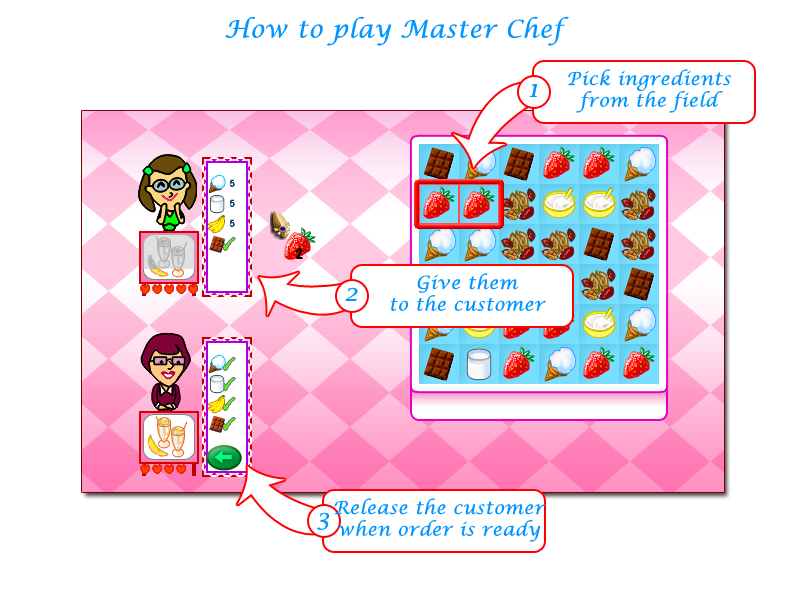
<style>
.page{position:relative;width:800px;height:600px;background:#ffffff}
.page>*{position:absolute;margin:0}
.t1{font:24px "LucidaCalligraphy-Italic";letter-spacing:0.03em;color:#0095ff}
.t2{font:18px "LucidaCalligraphy-Italic";letter-spacing:0.03em;color:#0095ff}
</style>
<div class="page">
<p class="t1" style="left:225px;top:16px;width:344px;height:30px">How to play Master Chef</p>
<p class="t2" style="left:568px;top:69px;width:163px;height:44px;text-align:center">Pick ingredients <br>from the field</p>
<p class="t1" style="left:529px;top:83px;width:9px;height:14px">1</p>
<p class="t2" style="left:390px;top:273px;width:156px;height:38px;text-align:center">Give them <br>to the customer</p>
<p class="t1" style="left:345px;top:287px;width:13px;height:14px">2</p>
<p class="t2" style="left:334px;top:498px;width:212px;height:44px;text-align:center">Release the customer<br>when order is ready</p>
<p class="t1" style="left:317px;top:512px;width:13px;height:18px">3</p>
</div>
